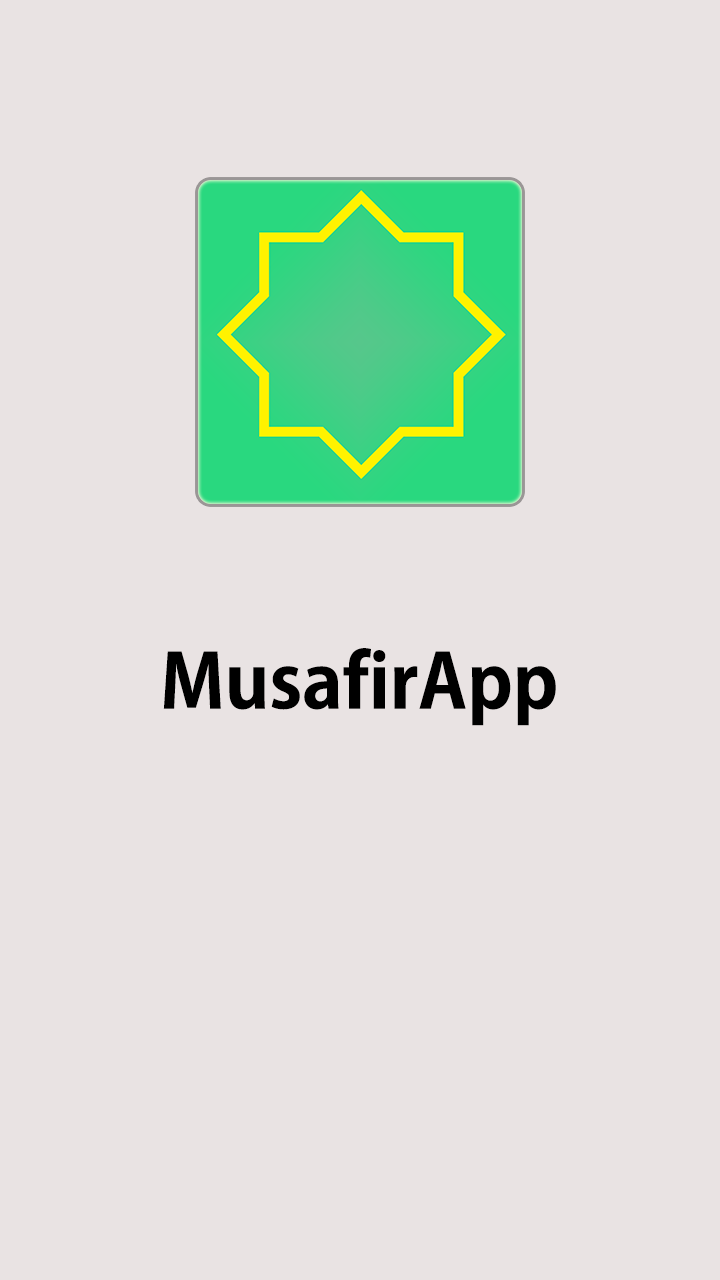
<style>
.page{position:relative;width:720px;height:1280px;background:#e9e3e3}
.page>*{position:absolute;margin:0}
.t1{font:74px "AdobeGothicStd-Bold";color:#000000}
</style>
<div class="page">
<p class="t1" style="left:163px;top:648px;width:393px;height:78px">MusafirApp</p>
</div>
